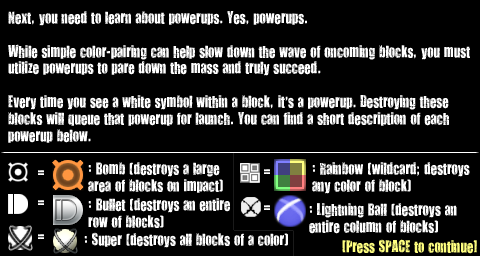
<style>
.page{position:relative;width:480px;height:256px;background:#000000}
.page>*{position:absolute;margin:0}
.t1{font:14px "YouAreLoved";color:#ffffff}
.t2{font:14px "YouAreLoved";color:#ffff80}
</style>
<div class="page">
<p class="t1" style="left:8px;top:11px;width:462px;height:132px">Next, you need to learn about powerups. Yes, powerups.<br><br>While simple color-pairing can help slow down the wave of oncoming blocks, you must<br>utilize powerups to pare down the mass and truly succeed.<br><br>Every time you see a white symbol within a block, it’s a powerup. Destroying these<br>blocks will queue that powerup for launch. You can find a short description of each<br>powerup below.</p>
<p class="t1" style="left:38px;top:170px;width:6px;height:5px">=</p>
<p class="t1" style="left:88px;top:162px;width:135px;height:31px">: Bomb (destroys a large<br>area of blocks on impact)</p>
<p class="t1" style="left:264px;top:169px;width:6px;height:5px">=</p>
<p class="t1" style="left:312px;top:162px;width:158px;height:32px">: Rainbow (wildcard; destroys<br>any color of block)</p>
<p class="t1" style="left:88px;top:198px;width:142px;height:30px">: Bullet (destroys an entire<br>row of blocks)</p>
<p class="t1" style="left:38px;top:200px;width:6px;height:5px">=</p>
<p class="t1" style="left:264px;top:205px;width:6px;height:5px">=</p>
<p class="t1" style="left:309px;top:203px;width:148px;height:31px">: Lightning Ball (destroys an<br>entire column of blocks)</p>
<p class="t1" style="left:84px;top:232px;width:204px;height:16px">: Super (destroys all blocks of a color)</p>
<p class="t1" style="left:38px;top:234px;width:6px;height:5px">=</p>
<p class="t2" style="left:342px;top:239px;width:135px;height:15px">[Press SPACE to continue]</p>
</div>
